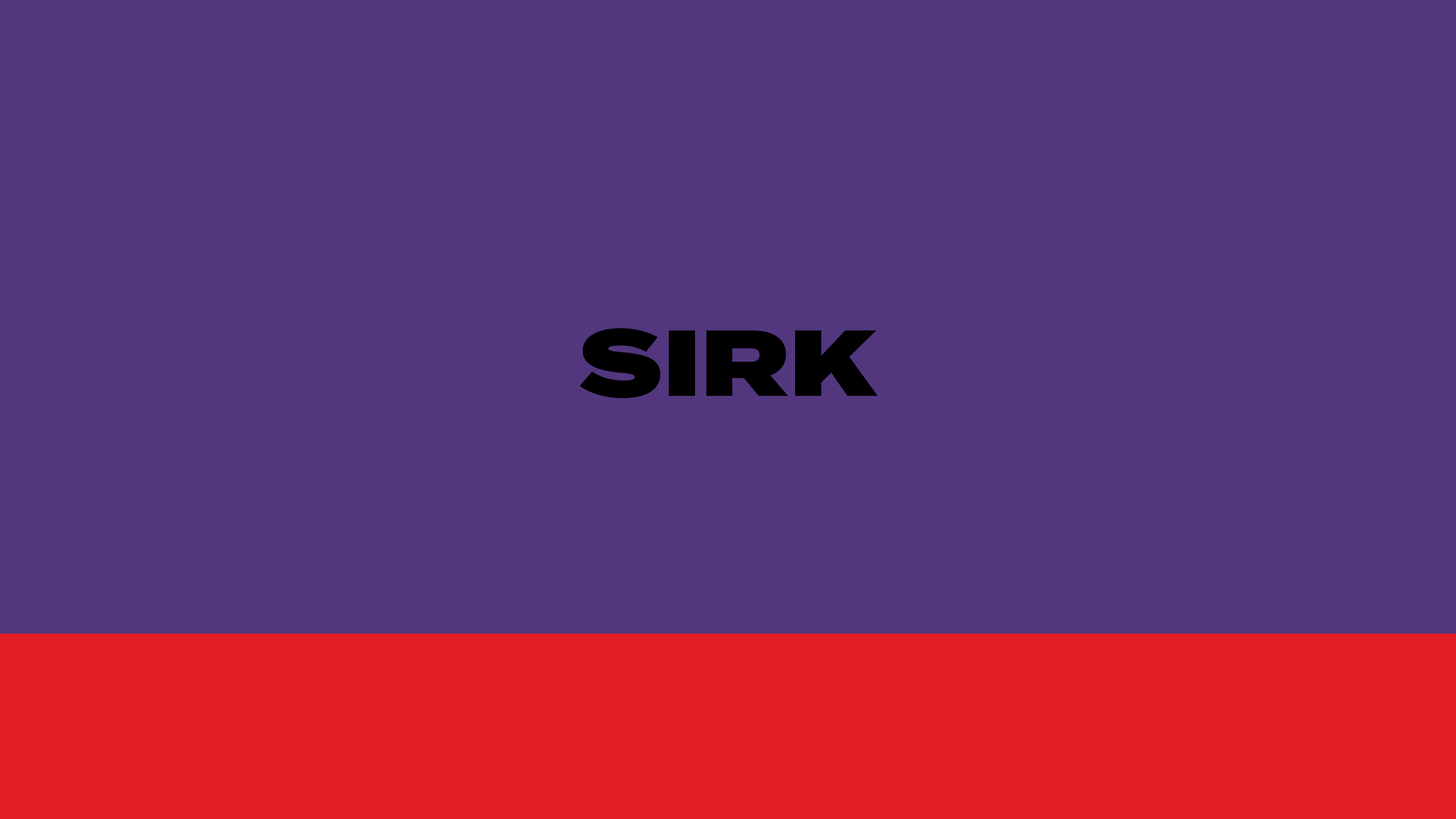
<style>
.page{position:relative;width:1456px;height:819px;background:#52377e}
.page>*{position:absolute;margin:0}
.t1{font:93.3px "Termina-Black";color:#000000}
</style>
<div class="page">
<p class="t1" style="left:580px;top:328px;width:298px;height:70px">SIRK</p>
</div>
